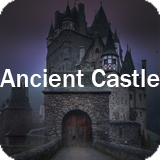
<style>
.page{position:relative;width:160px;height:160px}
.page>*{position:absolute;margin:0}
.t1{font:26px "FranklinGothic-Medium";color:#ffffff}
</style>
<div class="page">
<p class="t1" style="left:0px;top:69px;width:160px;height:18px">Ancient Castle</p>
</div>
